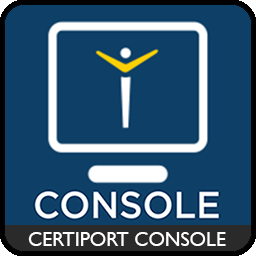
<style>
.page{position:relative;width:256px;height:256px;background:#0e4067}
.page>*{position:absolute;margin:0}
.t1{font:20px "GillSansMT";color:#ffffff}
</style>
<div class="page">
<p class="t1" style="left:28px;top:232px;width:198px;height:14px">CERTIPORT CONSOLE</p>
</div>
